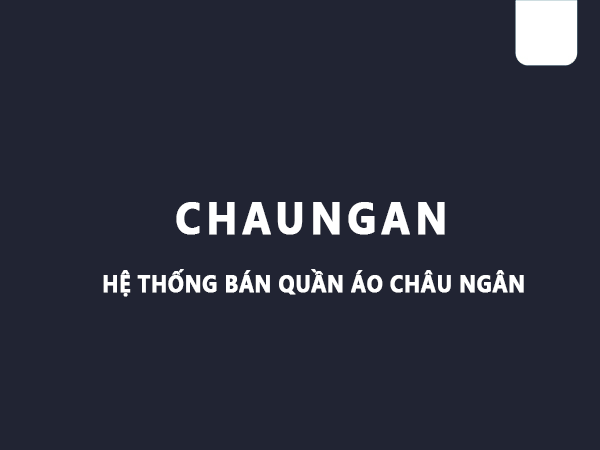
<style>
.page{position:relative;width:600px;height:450px;background:#212433}
.page>*{position:absolute;margin:0}
.t1{font:45px "SegoeUI-Bold";letter-spacing:0.11em;color:#ffffff;font-weight:bold;scale:0.89 1}
.t2{font:24px "SegoeUI-Bold";color:#ffffff;font-weight:bold;scale:0.89 1}
</style>
<div class="page">
<p class="t1" style="left:176px;top:202px;width:269px;height:33px">CHAUNGAN</p>
<p class="t2" style="left:103px;top:269px;width:421px;height:28px">HỆ THỐNG BÁN QUẦN ÁO CHÂU NGÂN</p>
</div>
